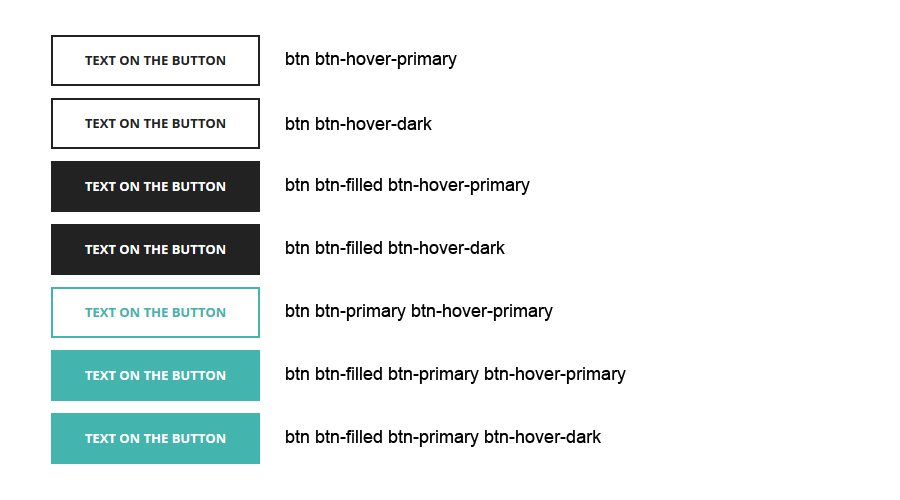
<style>
.page{position:relative;width:900px;height:500px;background:#ffffff}
.page>*{position:absolute;margin:0}
.t1{font:18px "ArialMT";color:#000000}
</style>
<div class="page">
<p class="t1" style="left:286px;top:52px;width:171px;height:17px">btn btn-hover-primary</p>
<p class="t1" style="left:286px;top:117px;width:146px;height:13px">btn btn-hover-dark</p>
<p class="t1" style="left:286px;top:178px;width:244px;height:17px">btn btn-filled btn-hover-primary</p>
<p class="t1" style="left:286px;top:241px;width:219px;height:13px">btn btn-filled btn-hover-dark</p>
<p class="t1" style="left:286px;top:304px;width:267px;height:17px">btn btn-primary btn-hover-primary</p>
<p class="t1" style="left:286px;top:367px;width:340px;height:17px">btn btn-filled btn-primary btn-hover-primary</p>
<p class="t1" style="left:286px;top:430px;width:315px;height:17px">btn btn-filled btn-primary btn-hover-dark</p>
</div>
